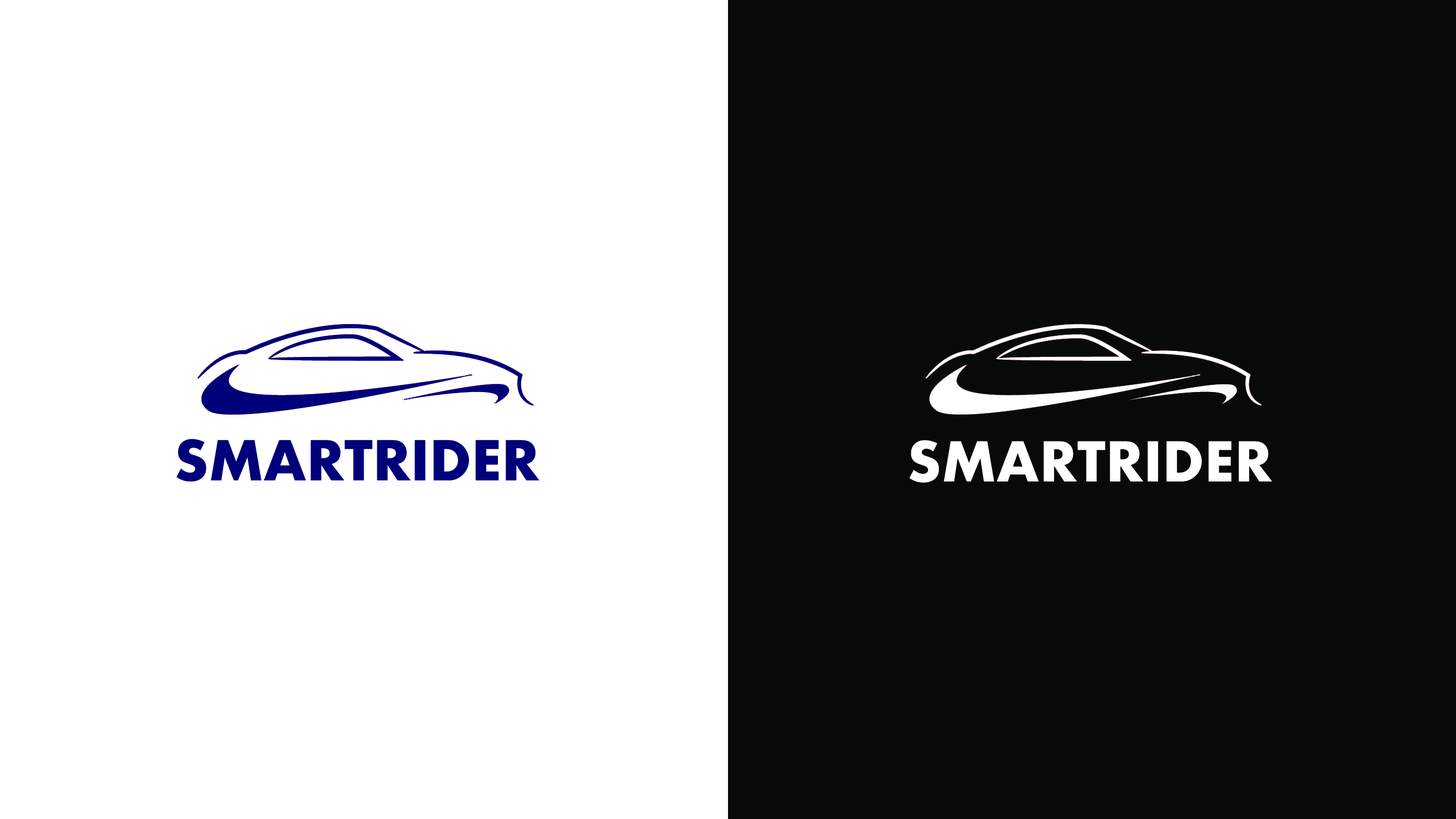
<style>
.page{position:relative;width:1456px;height:819px;background:#ffffff}
.page>*{position:absolute;margin:0}
.t1{font:53.4px "Futura-Bold";color:#00007a}
.t2{font:53.4px "Futura-Bold";color:#ffffff}
</style>
<div class="page">
<p class="t1" style="left:176px;top:439px;width:364px;height:42px">SMARTRIDER</p>
<p class="t2" style="left:909px;top:440px;width:364px;height:42px">SMARTRIDER</p>
</div>
